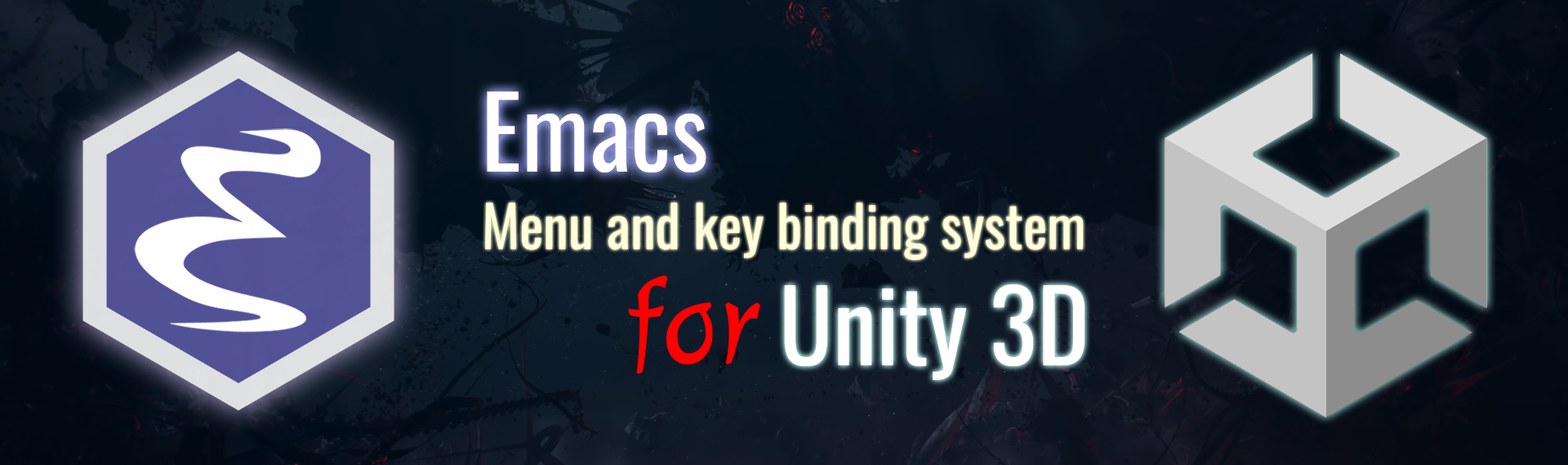
<style>
.page{position:relative;width:1568px;height:465px}
.page>*{position:absolute;margin:0}
.t1{font:98.5px "Oswald-Regular";color:#ffffff}
.t2{font:56.8px "Oswald-Regular";color:#fffedc}
.t3{font:119.2px "Julee-Regular";color:#ff0000}
</style>
<div class="page">
<p class="t1" style="left:487px;top:91px;width:219px;height:81px">Emacs</p>
<p class="t2" style="left:485px;top:203px;width:598px;height:57px">Menu and key binding system</p>
<p class="t3" style="left:628px;top:275px;width:132px;height:99px">for</p>
<p class="t1" style="left:784px;top:284px;width:301px;height:96px">Unity 3D</p>
</div>
